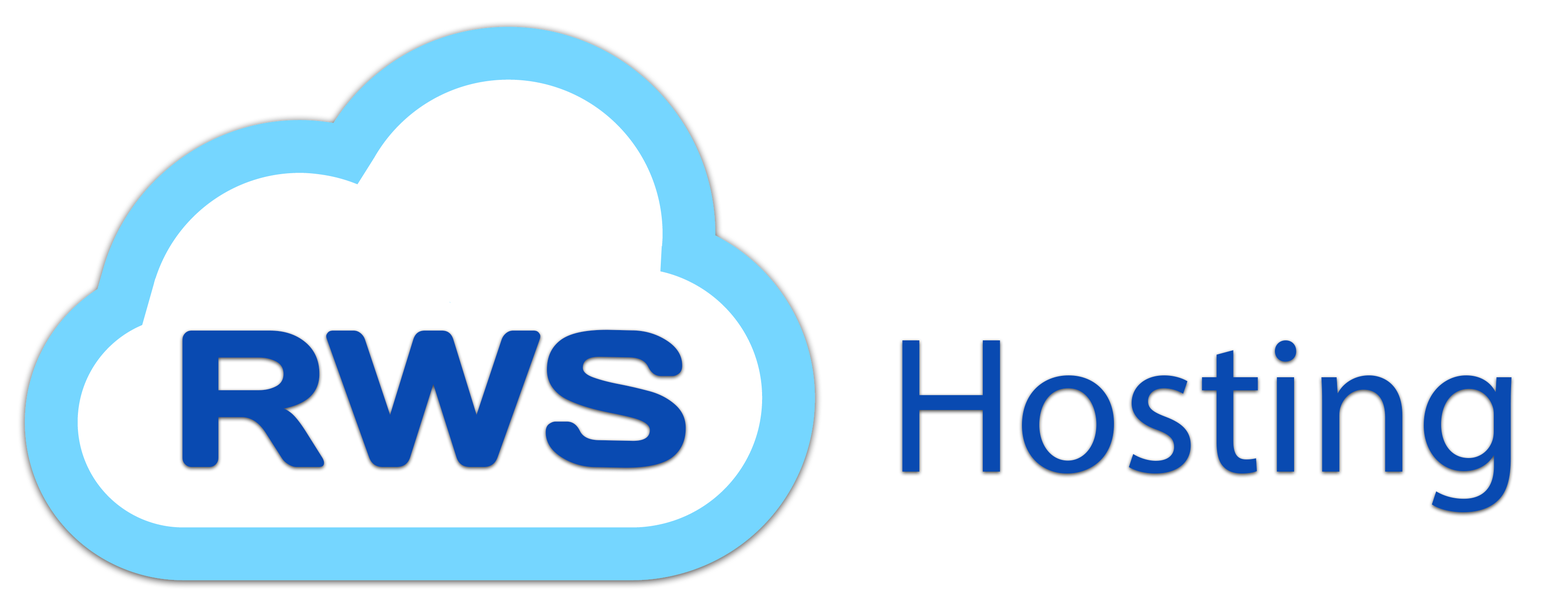
<style>
.page{position:relative;width:1568px;height:607px;background:#ffffff}
.page>*{position:absolute;margin:0}
.t1{font:194.4px "DaysOne-Regular";color:#094ab1}
.t2{font:194.4px "MyriadPro-Regular";color:#094ab1}
</style>
<div class="page">
<p class="t1" style="left:182px;top:329px;width:504px;height:139px">RWS</p>
<p class="t2" style="left:902px;top:340px;width:610px;height:172px">Hosting</p>
</div>
